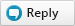
<style>
.page{position:relative;width:75px;height:26px}
.page>*{position:absolute;margin:0}
.t1{font:12px "OpenSans-Semibold";color:#171717}
</style>
<div class="page">
<p class="t1" style="left:27px;top:8px;width:32px;height:12px">Reply</p>
</div>
